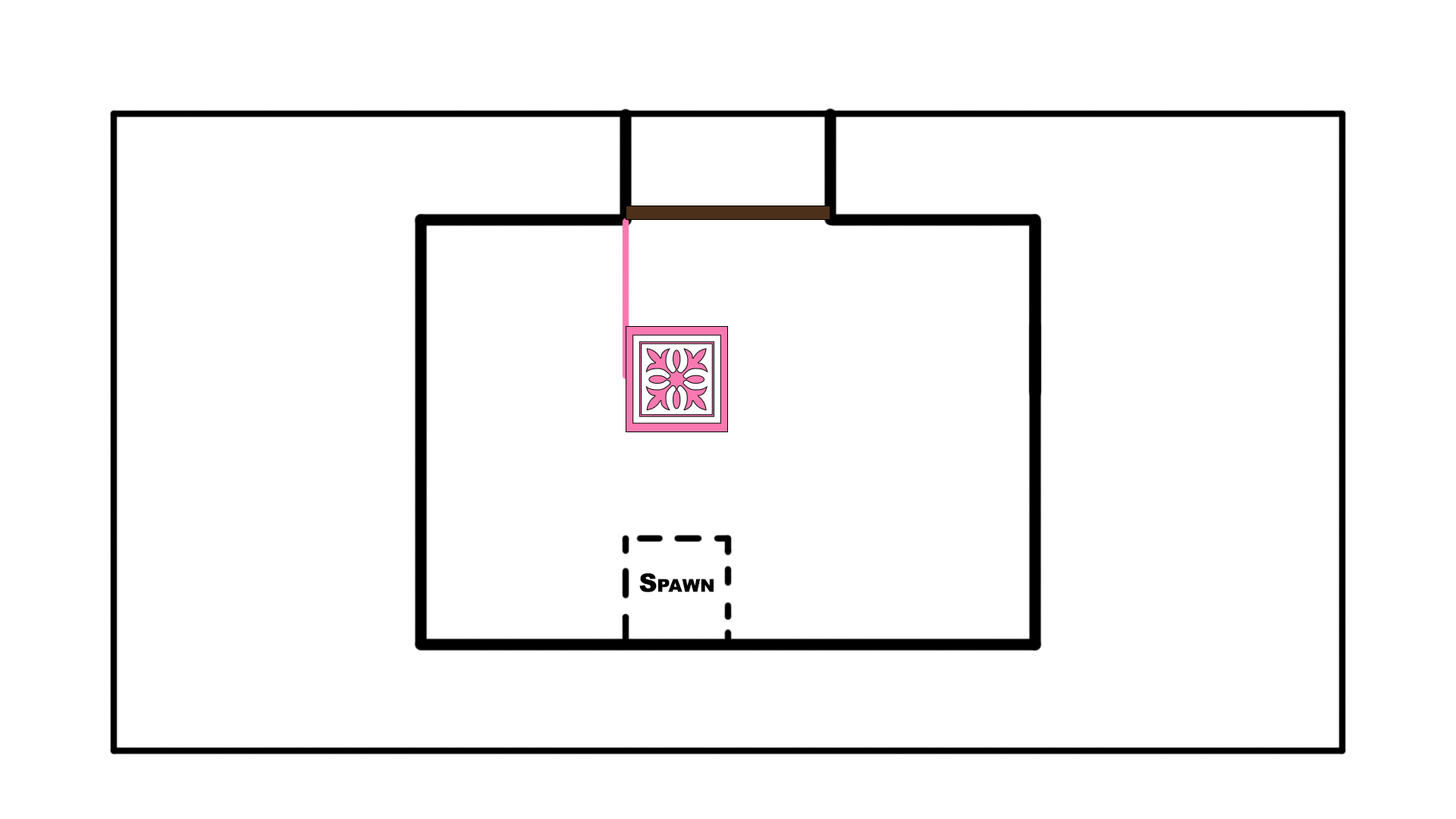
<style>
.page{position:relative;width:1456px;height:819px;background:#ffffff}
.page>*{position:absolute;margin:0}
.t1{font:25.3px "Arial-Black";color:#000000;font-variant:small-caps}
</style>
<div class="page">
<p class="t1" style="left:639px;top:573px;width:75px;height:19px">Spawn</p>
</div>
